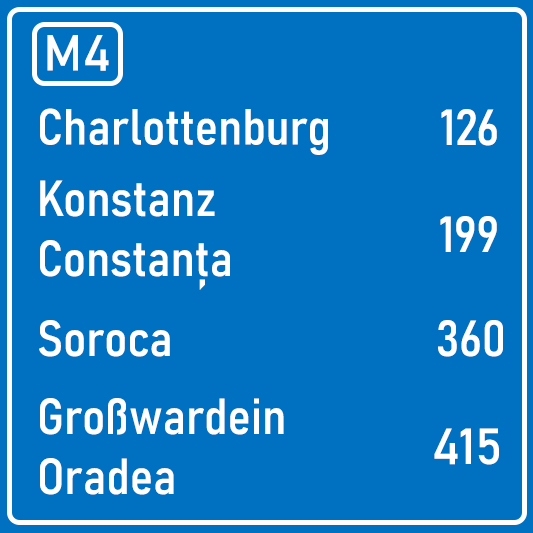
<style>
.page{position:relative;width:533px;height:533px;background:#0070c0}
.page>*{position:absolute;margin:0}
.t1{font:50px "Bahnschrift";color:#ffffff}
.t2{font:50px "Bahnschrift-SemiCondensed";color:#ffffff}
</style>
<div class="page">
<p class="t1" style="left:47px;top:35px;width:62px;height:36px">M4</p>
<p class="t2" style="left:40px;top:108px;width:288px;height:47px">Charlottenburg</p>
<p class="t2" style="left:441px;top:109px;width:56px;height:37px">126</p>
<p class="t2" style="left:40px;top:180px;width:190px;height:110px">Konstanz<br>Constanța</p>
<p class="t2" style="left:440px;top:216px;width:57px;height:36px">199</p>
<p class="t2" style="left:39px;top:320px;width:131px;height:37px">Soroca</p>
<p class="t2" style="left:438px;top:320px;width:65px;height:37px">360</p>
<p class="t2" style="left:40px;top:398px;width:244px;height:97px">Großwardein<br>Oradea</p>
<p class="t1" style="left:434px;top:428px;width:65px;height:37px">415</p>
</div>
